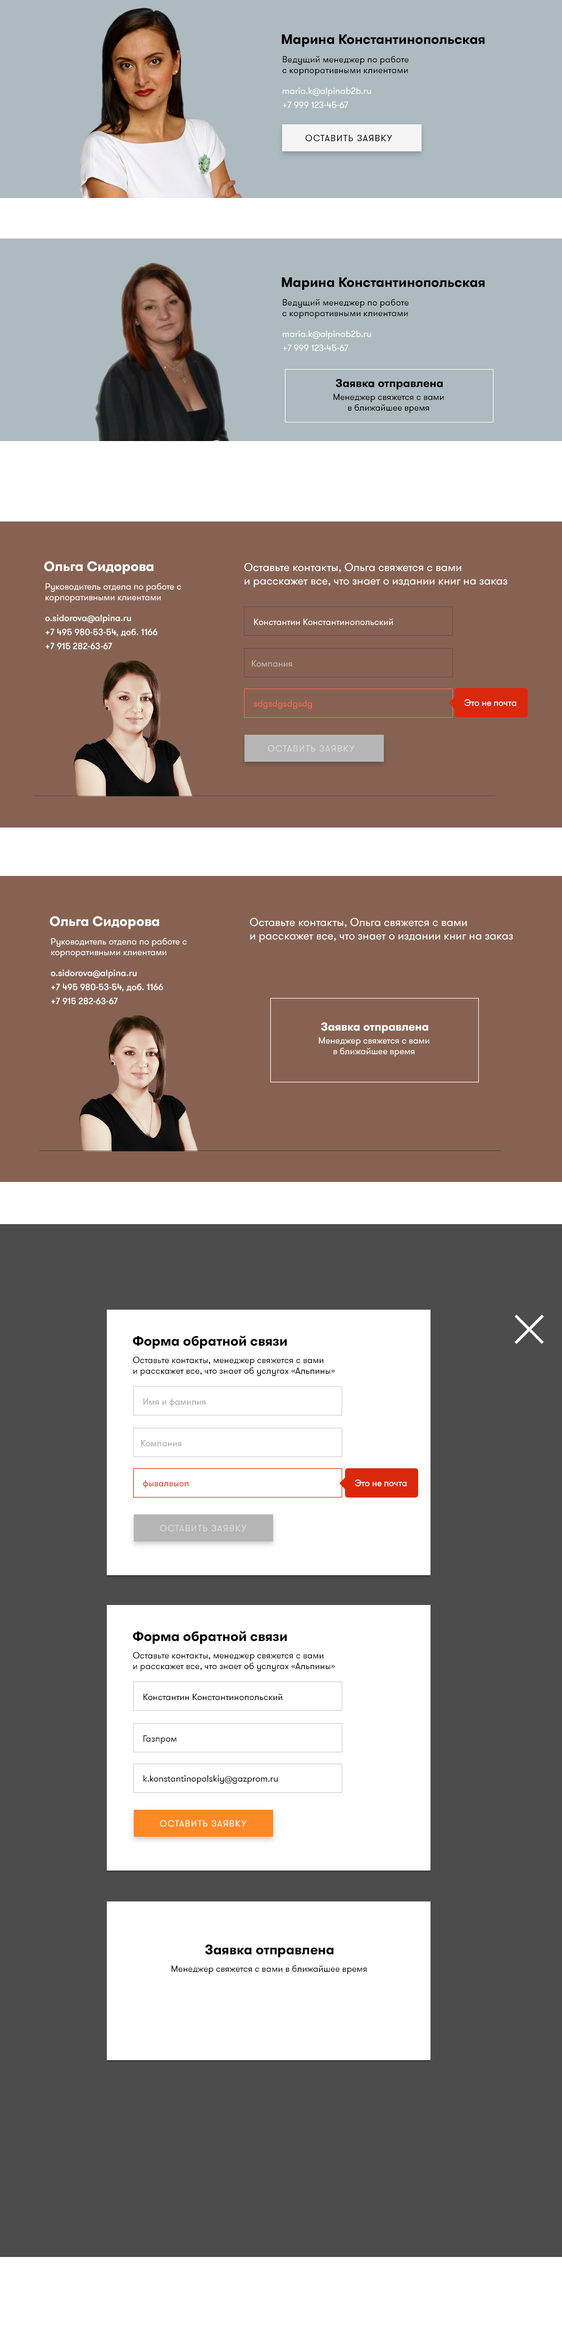
<style>
.page{position:relative;width:562px;height:2347px;background:#4c4c4c}
.page>*{position:absolute;margin:0}
.t1{font:13.5px "GTWalsheimProBold";color:#000000}
.t2{font:9px "GTWalsheimProRegular";color:#000000}
.t3{font:9px/14.1px "GTWalsheimProRegular";color:#ffffff}
.t4{font:9px "GTWalsheimProRegular";letter-spacing:0.08em;color:#000000;text-transform:uppercase}
.t5{font:11.2px "GTWalsheimProBold";color:#000000}
.t6{font:13.5px "GTWalsheimProBold";color:#ffffff}
.t7{font:11.2px "GTWalsheimProRegular";color:#ffffff}
.t8{font:9px "GTWalsheimProRegular";color:#ffffff}
.t9{font:9px/14.1px "GTWalsheimProMedium";color:#ffffff}
.t10{font:9px "GTWalsheimProRegular";color:#c6b8b3}
.t11{font:9px "GTWalsheimProRegular";color:#ff6850}
.t12{font:9px "GTWalsheimProRegular";letter-spacing:0.08em;color:#dcdcdc;text-transform:uppercase}
.t13{font:11.2px "GTWalsheimProBold";color:#ffffff}
.t14{font:65.2px "HelveticaNeue-Thin";color:#ffffff}
.t15{font:9px "GTWalsheimProRegular";color:#a3a3a3}
.t16{font:9px "GTWalsheimProRegular";color:#da280c}
.t17{font:9px "GTWalsheimProRegular";letter-spacing:0.08em;color:#ffffff;text-transform:uppercase}
</style>
<div class="page">
<p class="t1" style="left:282px;top:34px;width:203px;height:13px">Марина Константинопольская</p>
<p class="t2" style="left:282px;top:56px;width:127px;height:19px">Ведущий менеджер по работе с корпоративными клиентами</p>
<p class="t3" style="left:283px;top:87px;width:88px;height:22px">maria.k@alpinab2b.ru<br>+7 999 123-45-67</p>
<p class="t4" style="left:305px;top:134px;width:88px;height:8px">ОСТАВИТЬ ЗАЯВКУ</p>
<p class="t1" style="left:282px;top:277px;width:203px;height:13px">Марина Константинопольская</p>
<p class="t2" style="left:282px;top:299px;width:127px;height:19px">Ведущий менеджер по работе с корпоративными клиентами</p>
<p class="t3" style="left:283px;top:330px;width:88px;height:22px">maria.k@alpinab2b.ru<br>+7 999 123-45-67</p>
<p class="t5" style="left:336px;top:379px;width:107px;height:11px">Заявка отправлена</p>
<p class="t2" style="left:334px;top:393px;width:110px;height:20px;text-align:center">Менеджер свяжется с вами в ближайшее время</p>
<p class="t6" style="left:44px;top:561px;width:110px;height:13px">Ольга Сидорова</p>
<p class="t7" style="left:244px;top:562px;width:264px;height:25px">Оставьте контакты, Ольга свяжется с вами<br>и расскажет все, что знает о издании книг на заказ</p>
<p class="t8" style="left:46px;top:583px;width:135px;height:19px">Руководитель отдела по работе с корпоративными клиентами</p>
<p class="t9" style="left:45px;top:614px;width:113px;height:36px">o.sidorova@alpina.ru<br>+7 495 980-53-54, доб. 1166<br>+7 915 282-63-67</p>
<p class="t8" style="left:254px;top:618px;width:139px;height:8px">Константин Константинопольский</p>
<p class="t10" style="left:252px;top:660px;width:40px;height:7px">Компания</p>
<p class="t11" style="left:254px;top:700px;width:58px;height:9px">sdgsdgsdgsdg</p>
<p class="t8" style="left:465px;top:699px;width:52px;height:7px">Это не почта</p>
<p class="t12" style="left:268px;top:745px;width:87px;height:7px">ОСТАВИТЬ ЗАЯВКУ</p>
<p class="t6" style="left:50px;top:916px;width:109px;height:13px">Ольга Сидорова</p>
<p class="t7" style="left:250px;top:917px;width:264px;height:25px">Оставьте контакты, Ольга свяжется с вами<br>и расскажет все, что знает о издании книг на заказ</p>
<p class="t8" style="left:51px;top:938px;width:136px;height:19px">Руководитель отдела по работе с корпоративными клиентами</p>
<p class="t9" style="left:51px;top:969px;width:112px;height:36px">o.sidorova@alpina.ru<br>+7 495 980-53-54, доб. 1166<br>+7 915 282-63-67</p>
<p class="t13" style="left:321px;top:1022px;width:108px;height:11px">Заявка отправлена</p>
<p class="t8" style="left:319px;top:1037px;width:111px;height:19px;text-align:center">Менеджер свяжется с вами в ближайшее время</p>
<p class="t14" style="left:515px;top:1315px;width:29px;height:29px">×</p>
<p class="t1" style="left:133px;top:1335px;width:154px;height:14px">Форма обратной связи</p>
<p class="t2" style="left:133px;top:1356px;width:202px;height:20px">Оставьте контакты, менеджер свяжется с вами<br>и расскажет все, что знает об услугах «Альпины»</p>
<p class="t15" style="left:143px;top:1398px;width:63px;height:9px">Имя и фамилия</p>
<p class="t15" style="left:141px;top:1439px;width:41px;height:8px">Компания</p>
<p class="t16" style="left:143px;top:1479px;width:46px;height:9px">фывалвыоп</p>
<p class="t8" style="left:355px;top:1479px;width:52px;height:7px">Это не почта</p>
<p class="t12" style="left:160px;top:1524px;width:87px;height:8px">ОСТАВИТЬ ЗАЯВКУ</p>
<p class="t1" style="left:133px;top:1631px;width:154px;height:13px">Форма обратной связи</p>
<p class="t2" style="left:133px;top:1652px;width:202px;height:20px">Оставьте контакты, менеджер свяжется с вами<br>и расскажет все, что знает об услугах «Альпины»</p>
<p class="t2" style="left:143px;top:1693px;width:139px;height:7px">Константин Константинопольский</p>
<p class="t2" style="left:143px;top:1735px;width:34px;height:9px">Газпром</p>
<p class="t2" style="left:143px;top:1775px;width:135px;height:9px">k.konstantinopolskiy@gazprom.ru</p>
<p class="t17" style="left:160px;top:1820px;width:87px;height:7px">ОСТАВИТЬ ЗАЯВКУ</p>
<p class="t1" style="left:205px;top:1944px;width:129px;height:14px">Заявка отправлена</p>
<p class="t2" style="left:172px;top:1965px;width:195px;height:9px">Менеджер свяжется с вами в ближайшее время</p>
</div>
